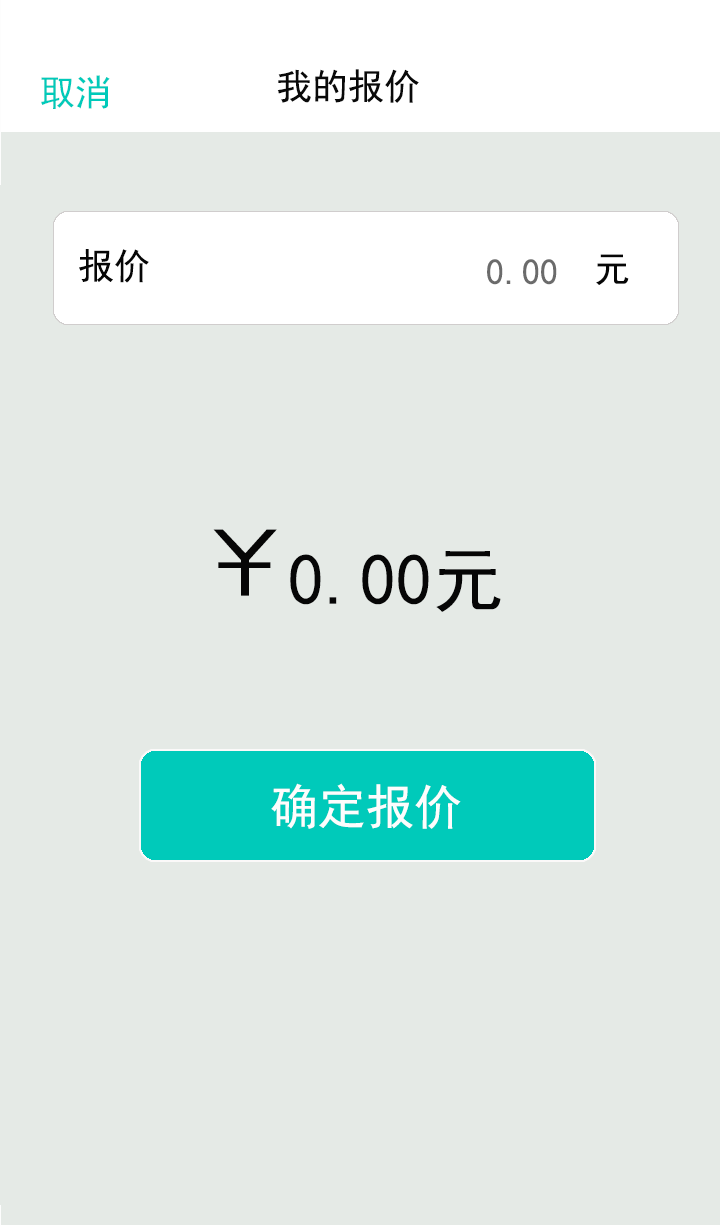
<style>
.page{position:relative;width:720px;height:1225px;background:#e5eae6}
.page>*{position:absolute;margin:0}
.t1{font:36px "SimHei";color:#00caba}
.t2{font:36px "SimHei";color:#090909}
.t3{font:36px "SimHei";color:#060606}
.t4{font:36px "SimHei";color:#6b6b6b}
.t5{font:100px "SimHei";color:#060606}
.t6{font:72px "SimHei";color:#060606}
.t7{font:48px "SimHei";color:#fdfdfd}
</style>
<div class="page">
<p class="t1" style="left:41px;top:75px;width:69px;height:34px">取消</p>
<p class="t2" style="left:277px;top:69px;width:142px;height:34px">我的报价</p>
<p class="t3" style="left:79px;top:249px;width:70px;height:34px">报价</p>
<p class="t3" style="left:596px;top:254px;width:33px;height:31px">元</p>
<p class="t4" style="left:487px;top:259px;width:70px;height:26px">0.00</p>
<p class="t5" style="left:213px;top:529px;width:64px;height:67px">￥</p>
<p class="t6" style="left:290px;top:551px;width:211px;height:61px">0.00元</p>
<p class="t7" style="left:271px;top:783px;width:190px;height:46px">确定报价</p>
</div>
